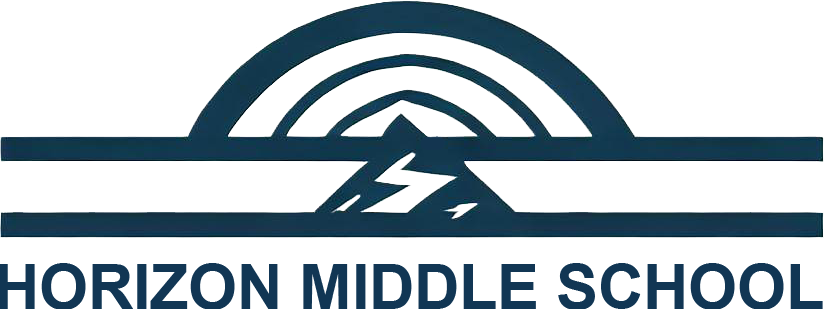
<style>
.page{position:relative;width:824px;height:309px;background:#ffffff}
.page>*{position:absolute;margin:0}
.t1{font:62.5px "Arial-BoldMT";color:#113654}
</style>
<div class="page">
<p class="t1" style="left:0px;top:263px;width:823px;height:47px">HORIZON MIDDLE SCHOOL</p>
</div>
